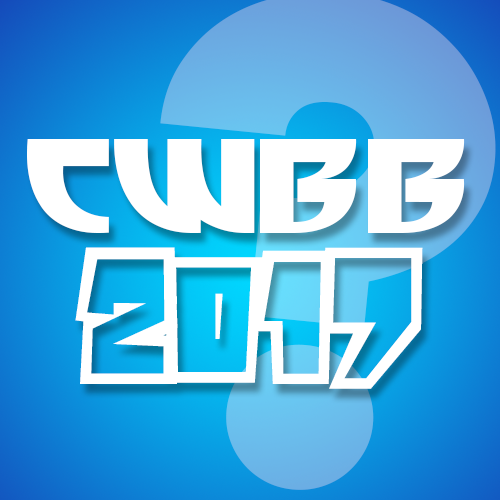
<style>
.page{position:relative;width:500px;height:500px}
.page>*{position:absolute;margin:0}
.t1{font:129px "BigHero";color:#ffffff}
.t2{font:84px/119px "Powerful";color:#ffffff}
</style>
<div class="page">
<p class="t1" style="left:27px;top:139px;width:438px;height:250px;text-align:center">CWBB<br><span class="t2">2017</span></p>
</div>
